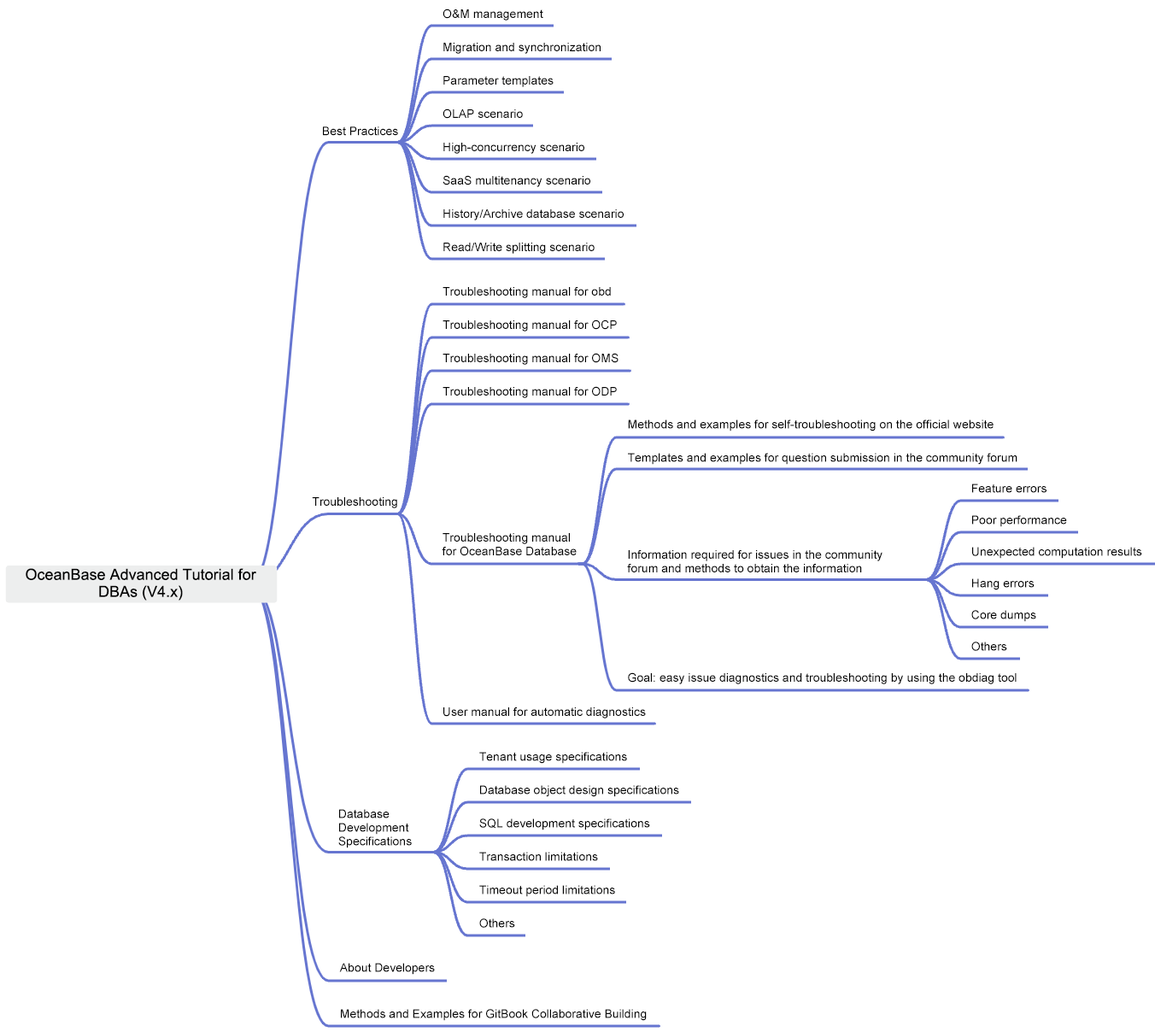
<style>
.page{position:relative;width:1155px;height:1032px;background:#ffffff}
.page>*{position:absolute;margin:0}
.t1{font:12px/33.3px "ArialMT";color:#000000}
.t2{font:12px "ArialMT";color:#000000}
.t3{font:12px/31.6px "ArialMT";color:#000000}
.t4{font:12px/13.7px "ArialMT";color:#000000}
.t5{font:15.4px/17.1px "ArialMT";color:#000000}
</style>
<div class="page">
<p class="t1" style="left:443px;top:9px;width:181px;height:245px">O&amp;M management<br>Migration and synchronization<br>Parameter templates<br>OLAP scenario<br>High-concurrency scenario<br>SaaS multitenancy scenario<br>History/Archive database scenario<br>Read/Write splitting scenario</p>
<p class="t2" style="left:323px;top:126px;width:75px;height:10px">Best Practices</p>
<p class="t1" style="left:443px;top:287px;width:176px;height:111px">Troubleshooting manual for obd<br>Troubleshooting manual for OCP<br>Troubleshooting manual for OMS<br>Troubleshooting manual for ODP</p>
<p class="t1" style="left:628px;top:420px;width:390px;height:45px">Methods and examples for self-troubleshooting on the official website<br>Templates and examples for question submission in the community forum</p>
<p class="t3" style="left:972px;top:484px;width:170px;height:167px">Feature errors<br>Poor performance<br>Unexpected computation results<br>Hang errors<br>Core dumps<br>Others</p>
<p class="t2" style="left:312px;top:497px;width:85px;height:11px">Troubleshooting</p>
<p class="t4" style="left:442px;top:533px;width:135px;height:23px">Troubleshooting manual for OceanBase Database</p>
<p class="t4" style="left:627px;top:550px;width:256px;height:22px">Information required for issues in the community forum and methods to obtain the information</p>
<p class="t5" style="left:26px;top:568px;width:230px;height:33px;text-align:center">OceanBase Advanced Tutorial for DBAs (V4.x)</p>
<p class="t2" style="left:628px;top:672px;width:389px;height:12px">Goal: easy issue diagnostics and troubleshooting by using the obdiag tool</p>
<p class="t2" style="left:443px;top:707px;width:203px;height:12px">User manual for automatic diagnostics</p>
<p class="t1" style="left:479px;top:752px;width:200px;height:176px">Tenant usage specifications<br>Database object design specifications<br>SQL development specifications<br>Transaction limitations<br>Timeout period limitations<br>Others</p>
<p class="t4" style="left:338px;top:809px;width:74px;height:39px">Database Development Specifications</p>
<p class="t2" style="left:339px;top:963px;width:96px;height:12px">About Developers</p>
<p class="t2" style="left:341px;top:1009px;width:306px;height:12px">Methods and Examples for GitBook Collaborative Building</p>
</div>
